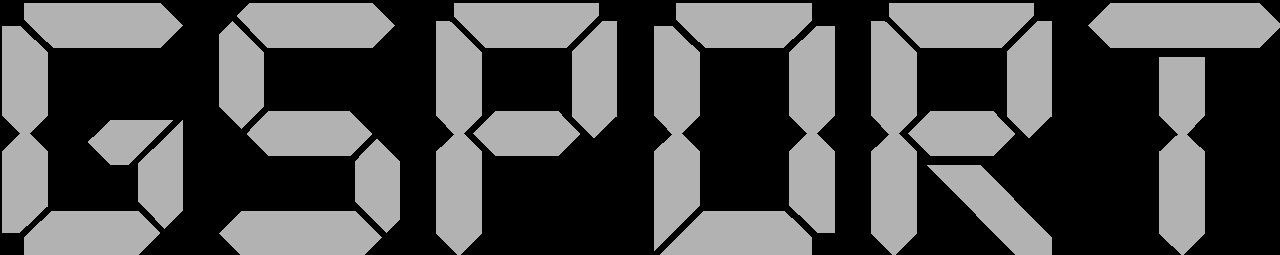
<style>
.page{position:relative;width:1280px;height:255px;background:#000000}
.page>*{position:absolute;margin:0}
.t1{font:296.1px "NI7SEG";color:#b3b3b3}
</style>
<div class="page">
<p class="t1" style="left:2px;top:3px;width:1280px;height:253px">GSPORT</p>
</div>
